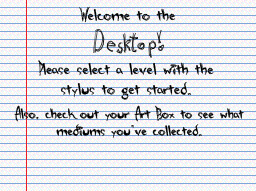
<style>
.page{position:relative;width:256px;height:191px}
.page>*{position:absolute;margin:0}
.t1{font:16px "alienstrawberry";color:#000000}
.t2{font:14px "alienstrawberry";color:#000000}
</style>
<div class="page">
<p class="t1" style="left:79px;top:6px;width:97px;height:17px">Welcome to the</p>
<p class="t1" style="left:38px;top:60px;width:176px;height:40px;text-align:center">Please select a level with the stylus to get started.</p>
<p class="t2" style="left:14px;top:105px;width:230px;height:33px;text-align:center">Also, check out your Art Box to see what mediums you’ve collected.</p>
</div>
